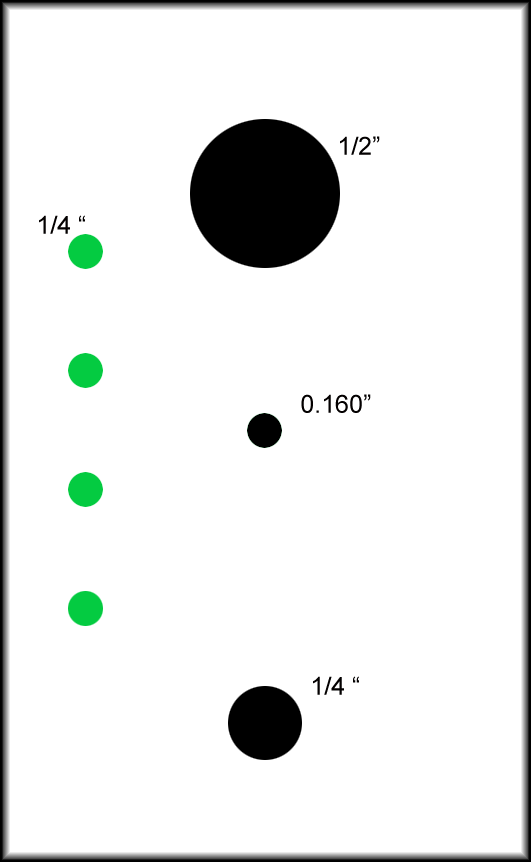
<style>
.page{position:relative;width:531px;height:862px;background:#ffffff}
.page>*{position:absolute;margin:0}
.t1{font:25px "ArialMT";color:#030000}
</style>
<div class="page">
<p class="t1" style="left:340px;top:136px;width:40px;height:19px">1/2”</p>
<p class="t1" style="left:39px;top:215px;width:46px;height:19px">1/4 “</p>
<p class="t1" style="left:301px;top:394px;width:70px;height:19px">0.160”</p>
<p class="t1" style="left:313px;top:676px;width:46px;height:19px">1/4 “</p>
</div>
